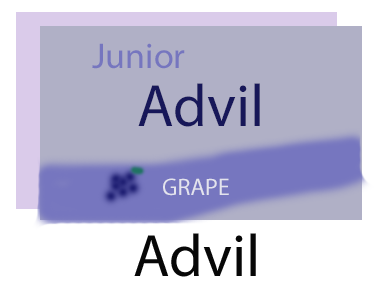
<style>
.page{position:relative;width:374px;height:289px;background:#b0b0c6}
.page>*{position:absolute;margin:0}
.t1{font:36px "MyriadPro-Regular";color:#7676bf}
.t2{font:60px "MyriadPro-Regular";color:#171759}
.t3{font:24px "MyriadPro-Regular";color:#e3e3ed}
.t4{font:60px "MyriadPro-Regular";color:#070707}
</style>
<div class="page">
<p class="t1" style="left:92px;top:43px;width:93px;height:26px">Junior</p>
<p class="t2" style="left:138px;top:83px;width:122px;height:44px">Advil</p>
<p class="t3" style="left:163px;top:178px;width:66px;height:18px">GRAPE</p>
<p class="t4" style="left:134px;top:233px;width:122px;height:44px">Advil</p>
</div>
